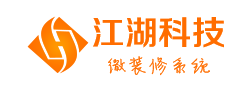
<style>
.page{position:relative;width:228px;height:91px;background:#ffffff}
.page>*{position:absolute;margin:0}
.t1{font:33.3px "FZZZHONGJW--GB1-0";color:#ff6d00;text-transform:uppercase}
.t2{font:20.8px "FZJLJW--GB1-0";color:#ff6d00;text-transform:uppercase}
</style>
<div class="page">
<p class="t1" style="left:93px;top:17px;width:131px;height:31px">江湖科技</p>
<p class="t2" style="left:108px;top:56px;width:102px;height:20px">微装修系统</p>
</div>
